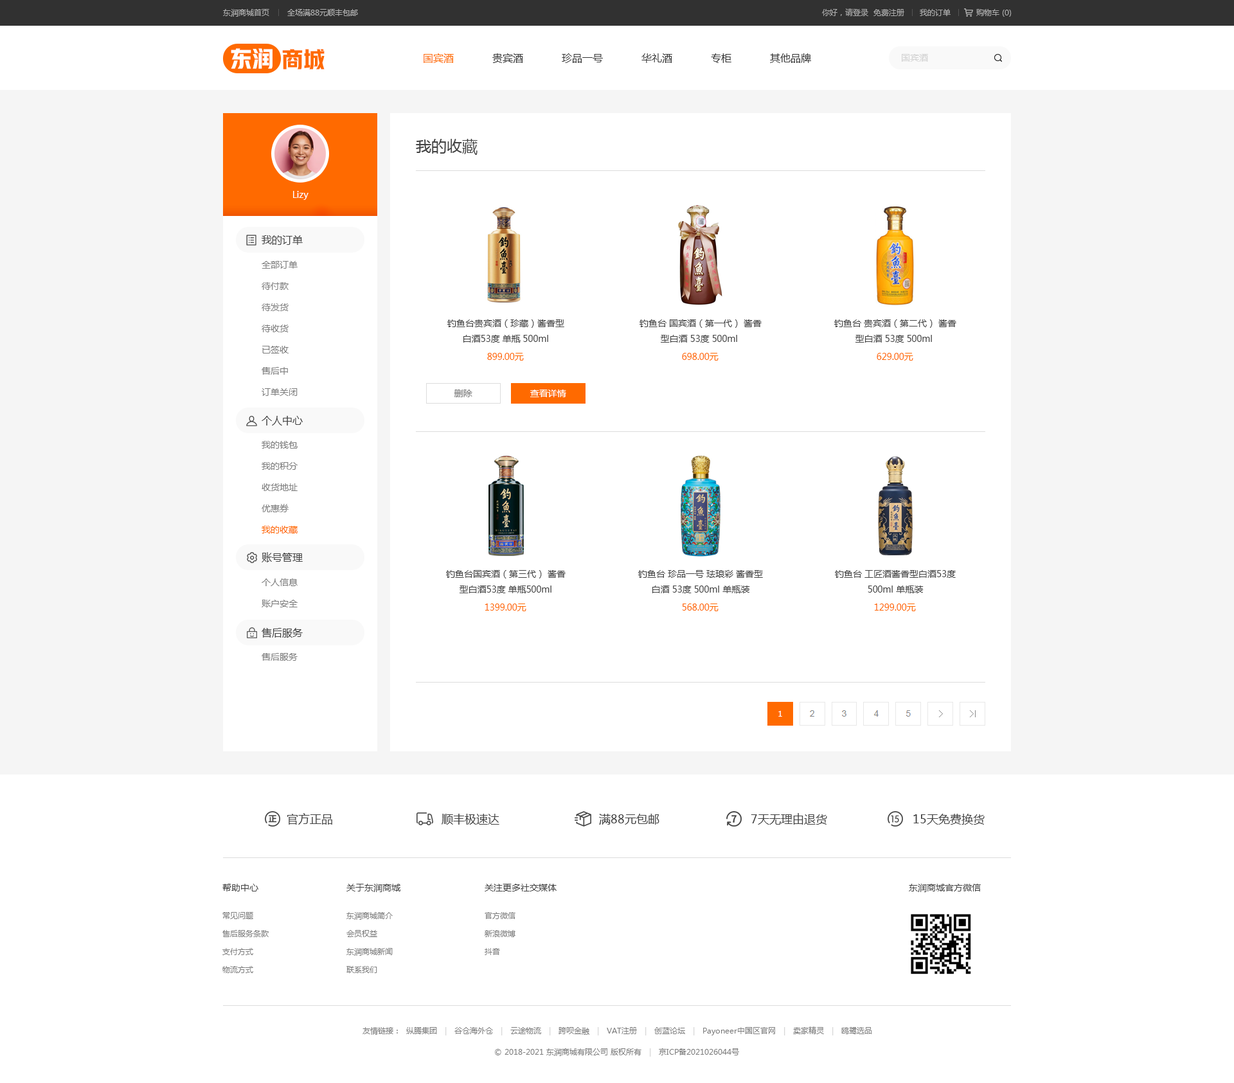
<style>
.page{position:relative;width:1234px;height:1083px;background:#ffffff}
.page>*{position:absolute;margin:0}
.t1{font:7.7px "MicrosoftYaHei";color:#b0b0b0}
.t2{font:7.7px "MicrosoftYaHei";color:#acacac}
.t3{font:21.9px "HYYakuHei-HEW";color:#ffffff}
.t4{font:21.9px "HYYakuHei-HEW";color:#ff6a00}
.t5{font:10.3px "MicrosoftYaHei";color:#333333}
.t6{font:10.3px "MicrosoftYaHei";color:#ff6a00}
.t7{font:9px "MicrosoftYaHei";color:#d2d2d2}
.t8{font:15.4px "MicrosoftYaHei";color:#434343}
.t9{font:9px "MicrosoftYaHei";color:#ffffff}
.t10{font:10.3px "MicrosoftYaHei";color:#434343}
.t11{font:9px/21.2px "MicrosoftYaHei";color:#7d7d7d}
.t12{font:9px/15.4px "MicrosoftYaHei";color:#434343}
.t13{font:9px "MicrosoftYaHei";color:#ff6a00}
.t14{font:9px "MicrosoftYaHei";color:#7d7d7d}
.t15{font:9px/21.2px "MicrosoftYaHei";color:#ff6a00}
.t16{font:7.7px "MicrosoftYaHei";color:#ffffff;text-transform:uppercase}
.t17{font:11.6px "MicrosoftYaHei";color:#434343}
.t18{font:9px "MicrosoftYaHei";color:#434343}
.t19{font:7.7px/18px "MicrosoftYaHei";color:#7d7d7d}
.t20{font:7.7px "MicrosoftYaHei";color:#7d7d7d}
.t21{font:7.7px "MicrosoftYaHei";color:#d2d2d2}
</style>
<div class="page">
<p class="t1" style="left:223px;top:9px;width:135px;height:8px">东润商城首页       全场满88元顺丰包邮</p>
<p class="t2" style="left:822px;top:8px;width:190px;height:9px">你好，请登录  免费注册      我的订单          购物车 (0)</p>
<p class="t3" style="left:231px;top:48px;width:42px;height:21px">东润</p>
<p class="t4" style="left:282px;top:49px;width:43px;height:20px">商城</p>
<p class="t5" style="left:424px;top:53px;width:387px;height:10px"><span class="t6">国宾酒</span>            贵宾酒            珍品一号            华礼酒            专柜            其他品牌</p>
<p class="t7" style="left:902px;top:54px;width:26px;height:8px">国宾酒</p>
<p class="t8" style="left:416px;top:139px;width:62px;height:16px">我的收藏</p>
<p class="t9" style="left:293px;top:191px;width:16px;height:9px">Lizy</p>
<p class="t10" style="left:262px;top:235px;width:41px;height:10px">我的订单</p>
<p class="t11" style="left:262px;top:261px;width:36px;height:135px">全部订单<br>待付款<br>待发货<br>待收货<br>已签收<br>售后中<br>订单关闭</p>
<p class="t12" style="left:447px;top:320px;width:117px;height:23px;text-align:center">钓鱼台贵宾酒（珍藏）酱香型<br>白酒53度 单瓶 500ml</p>
<p class="t12" style="left:640px;top:320px;width:122px;height:23px;text-align:center">钓鱼台 国宾酒（第一代） 酱香<br>型白酒 53度 500ml</p>
<p class="t12" style="left:834px;top:320px;width:123px;height:23px;text-align:center">钓鱼台 贵宾酒（第二代） 酱香<br>型白酒 53度 500ml</p>
<p class="t13" style="left:487px;top:353px;width:37px;height:8px">899.00元</p>
<p class="t13" style="left:682px;top:353px;width:37px;height:8px">698.00元</p>
<p class="t13" style="left:877px;top:353px;width:37px;height:8px">629.00元</p>
<p class="t14" style="left:454px;top:390px;width:19px;height:7px">删除</p>
<p class="t9" style="left:530px;top:390px;width:36px;height:7px">查看详情</p>
<p class="t10" style="left:262px;top:416px;width:41px;height:10px">个人中心</p>
<p class="t11" style="left:262px;top:441px;width:36px;height:93px">我的钱包<br>我的积分<br>收货地址<br>优惠券<br><span class="t15">我的收藏</span></p>
<p class="t10" style="left:262px;top:552px;width:41px;height:10px">账号管理</p>
<p class="t11" style="left:262px;top:579px;width:36px;height:29px">个人信息<br>账户安全</p>
<p class="t12" style="left:446px;top:570px;width:120px;height:23px;text-align:center">钓鱼台国宾酒（第三代） 酱香<br>型白酒53度 单瓶500ml</p>
<p class="t12" style="left:638px;top:570px;width:125px;height:23px;text-align:center">钓鱼台 珍品一号 珐琅彩 酱香型<br>白酒 53度 500ml 单瓶装</p>
<p class="t12" style="left:835px;top:570px;width:121px;height:23px;text-align:center">钓鱼台 工匠酒酱香型白酒53度<br>500ml 单瓶装</p>
<p class="t13" style="left:485px;top:604px;width:41px;height:7px">1399.00元</p>
<p class="t13" style="left:682px;top:604px;width:37px;height:7px">568.00元</p>
<p class="t13" style="left:874px;top:604px;width:42px;height:7px">1299.00元</p>
<p class="t10" style="left:262px;top:628px;width:41px;height:10px">售后服务</p>
<p class="t14" style="left:262px;top:653px;width:36px;height:8px">售后服务</p>
<p class="t16" style="left:779px;top:711px;width:3px;height:6px">1</p>
<p class="t17" style="left:287px;top:813px;width:45px;height:12px">官方正品</p>
<p class="t17" style="left:442px;top:814px;width:58px;height:11px">顺丰极速达</p>
<p class="t17" style="left:599px;top:814px;width:61px;height:11px">满88元包邮</p>
<p class="t17" style="left:751px;top:813px;width:76px;height:12px">7天无理由退货</p>
<p class="t17" style="left:914px;top:814px;width:71px;height:11px">15天免费换货</p>
<p class="t18" style="left:222px;top:884px;width:36px;height:8px">帮助中心</p>
<p class="t18" style="left:346px;top:884px;width:55px;height:8px">关于东润商城</p>
<p class="t18" style="left:485px;top:884px;width:72px;height:8px">关注更多社交媒体</p>
<p class="t18" style="left:909px;top:884px;width:72px;height:8px">东润商城官方微信</p>
<p class="t19" style="left:222px;top:912px;width:47px;height:61px">常见问题<br>售后服务条款<br>支付方式<br>物流方式</p>
<p class="t19" style="left:346px;top:912px;width:47px;height:61px">东润商城简介<br>会员权益<br>东润商城新闻<br>联系我们</p>
<p class="t19" style="left:485px;top:912px;width:31px;height:43px">官方微信<br>新浪微博<br>抖音</p>
<p class="t20" style="left:363px;top:1027px;width:509px;height:9px">友情链接：  纵腾集团   <span class="t21">|   </span>谷仓海外仓   <span class="t21">|   </span>云途物流   <span class="t21">|   </span>跨呗金融   <span class="t21">|   </span>VAT注册   <span class="t21">|   </span>创蓝论坛   <span class="t21">|   </span>Payoneer中国区官网   <span class="t21">|   </span>卖家精灵   <span class="t21">|   </span>鸥鹭选品</p>
<p class="t20" style="left:495px;top:1048px;width:244px;height:9px">© 2018-2021 东润商城有限公司 版权所有   <span class="t21">|   </span>京ICP备2021026044号</p>
</div>
